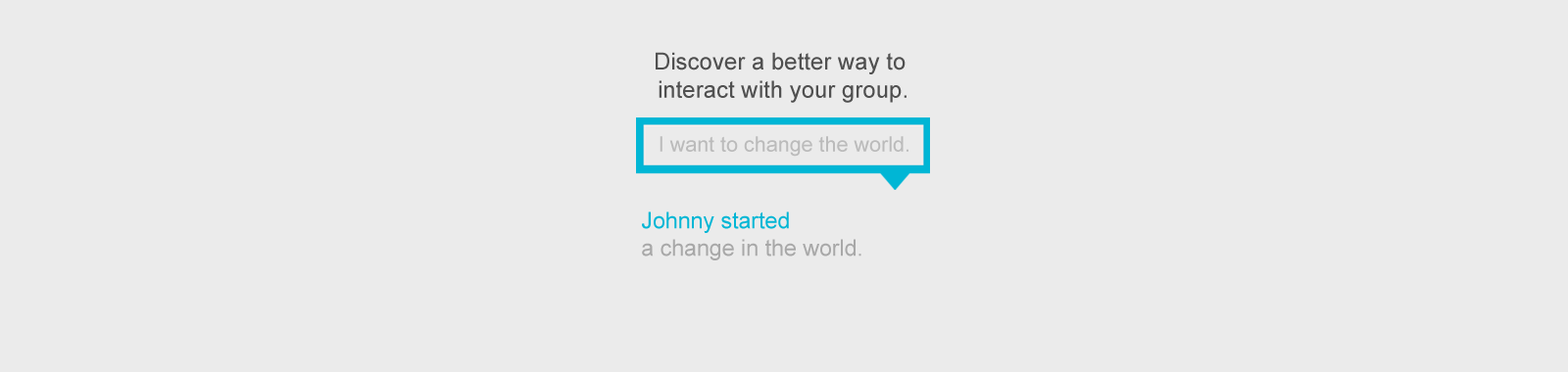
<style>
.page{position:relative;width:1568px;height:372px;background:#ebebeb}
.page>*{position:absolute;margin:0}
.t1{font:23.5px "ArialMT";color:#505050}
.t2{font:21.1px "ArialMT";color:#bbbbbb}
.t3{font:22.7px "ArialMT";color:#a8a8a8}
.t4{font:22.7px "ArialMT";color:#00b6d5}
</style>
<div class="page">
<p class="t1" style="left:656px;top:52px;width:250px;height:51px;text-align:center">Discover a better way to <br>interact with your group.</p>
<p class="t2" style="left:660px;top:136px;width:248px;height:21px">I want to change the world.</p>
<p class="t3" style="left:642px;top:212px;width:219px;height:49px"><span class="t4">Johnny started<br></span>a change in the world.</p>
</div>
